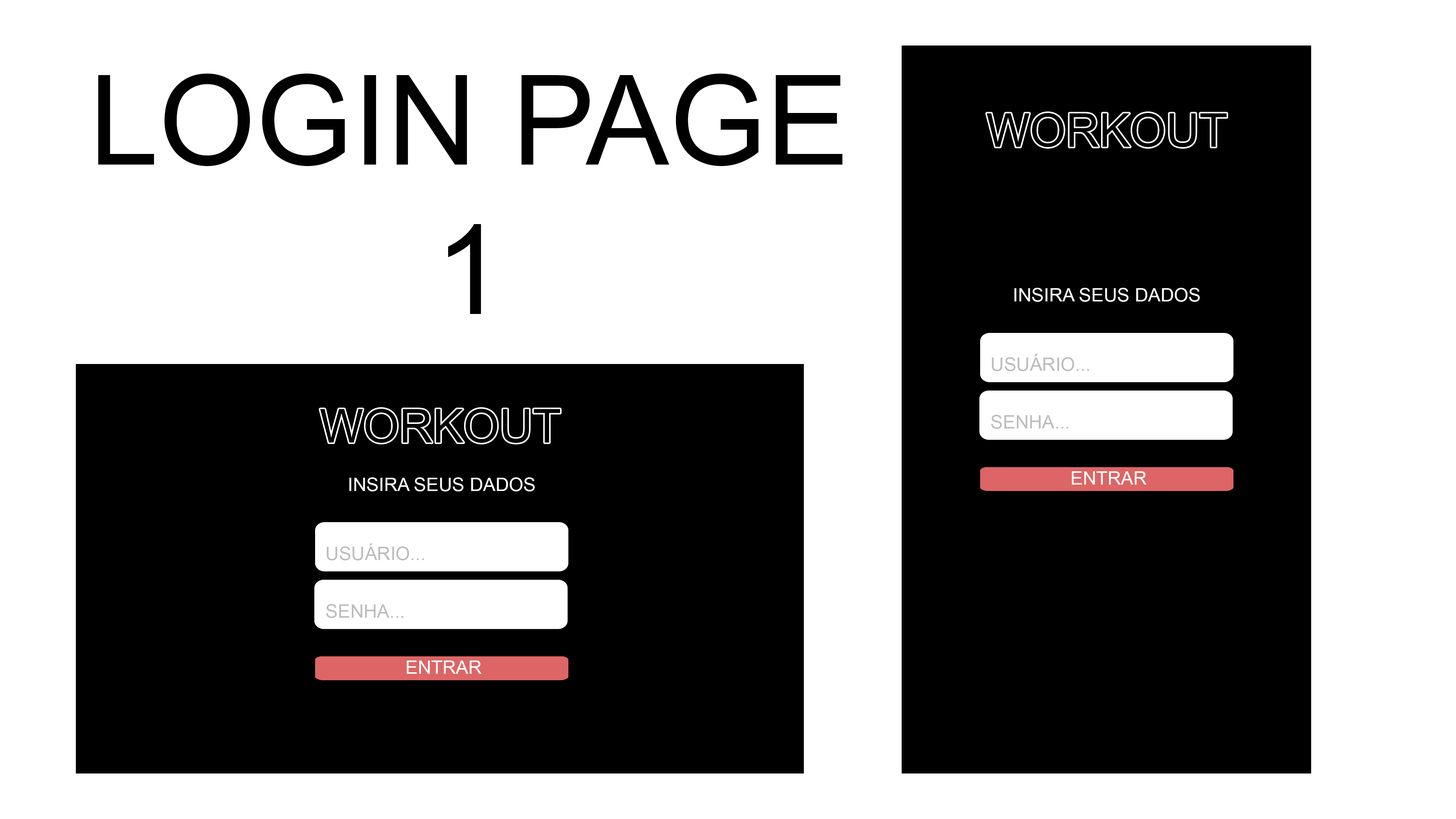
<style>
.page{position:relative;width:1456px;height:819px;background:#ffffff}
.page>*{position:absolute;margin:0}
.t1{font:124.7px "ArialMT";color:#000000}
.t2{font:18.6px "ArialMT";color:#ffffff}
.t3{font:18.6px "ArialMT";color:#bcbcbc}
</style>
<div class="page">
<p class="t1" style="left:98px;top:74px;width:744px;height:240px;text-align:center">LOGIN PAGE<br>1</p>
<p class="t2" style="left:1014px;top:288px;width:186px;height:14px">INSIRA SEUS DADOS</p>
<p class="t3" style="left:992px;top:354px;width:97px;height:17px">USUÁRIO...</p>
<p class="t3" style="left:991px;top:415px;width:77px;height:14px">SENHA...</p>
<p class="t2" style="left:1072px;top:471px;width:75px;height:14px">ENTRAR</p>
<p class="t2" style="left:349px;top:477px;width:186px;height:14px">INSIRA SEUS DADOS</p>
<p class="t3" style="left:326px;top:543px;width:98px;height:17px">USUÁRIO...</p>
<p class="t3" style="left:326px;top:604px;width:77px;height:14px">SENHA...</p>
<p class="t2" style="left:406px;top:660px;width:76px;height:14px">ENTRAR</p>
</div>
